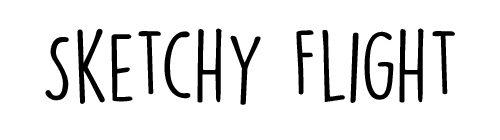
<style>
.page{position:relative;width:500px;height:140px;background:#ffffff}
.page>*{position:absolute;margin:0}
.t1{font:89.9px "DKLemonYellowSun";color:#000000}
</style>
<div class="page">
<p class="t1" style="left:45px;top:28px;width:410px;height:77px">Sketchy Flight</p>
</div>
